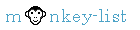
<style>
.page{position:relative;width:140px;height:30px;background:#ffffff}
.page>*{position:absolute;margin:0}
.t1{font:18px "Century";letter-spacing:0.025em;color:#4ca3c7}
</style>
<div class="page">
<p class="t1" style="left:6px;top:9px;width:120px;height:16px">m     nkey-list</p>
</div>
